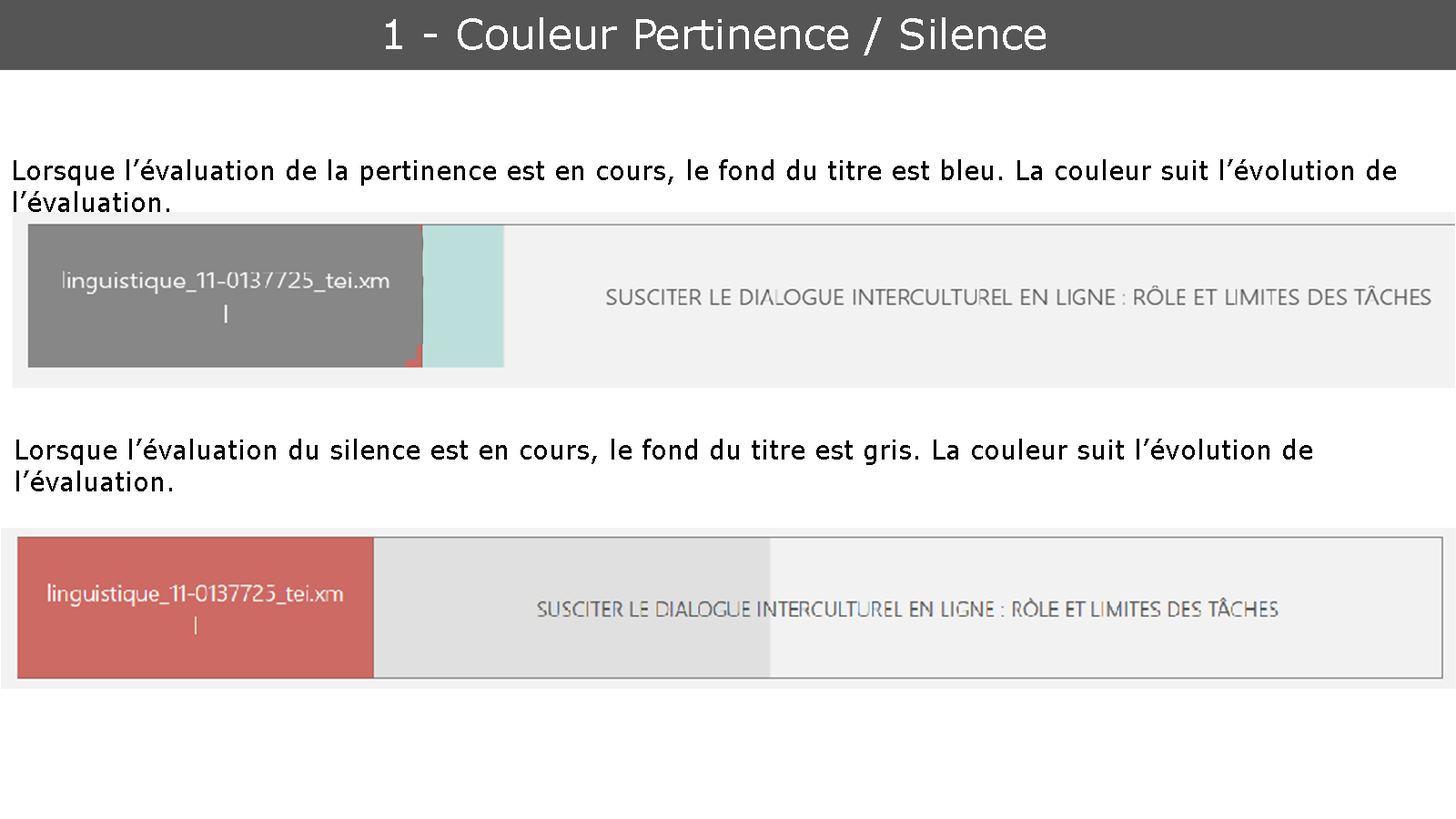
<style>
.page{position:relative;width:1456px;height:819px;background:#ffffff}
.page>*{position:absolute;margin:0}
.t1{font:41.7px "Verdana";color:#ffffff}
.t2{font:26.5px "Verdana";color:#000000}
</style>
<div class="page">
<p class="t1" style="left:386px;top:17px;width:660px;height:39px">1 - Couleur Pertinence / Silence</p>
<p class="t2" style="left:14px;top:159px;width:1382px;height:53px">Lorsque l’évaluation de la pertinence est en cours, le fond du titre est bleu. La couleur suit l’évolution de l’évaluation.</p>
<p class="t2" style="left:16px;top:439px;width:1296px;height:52px">Lorsque l’évaluation du silence est en cours, le fond du titre est gris. La couleur suit l’évolution de l’évaluation.</p>
</div>
